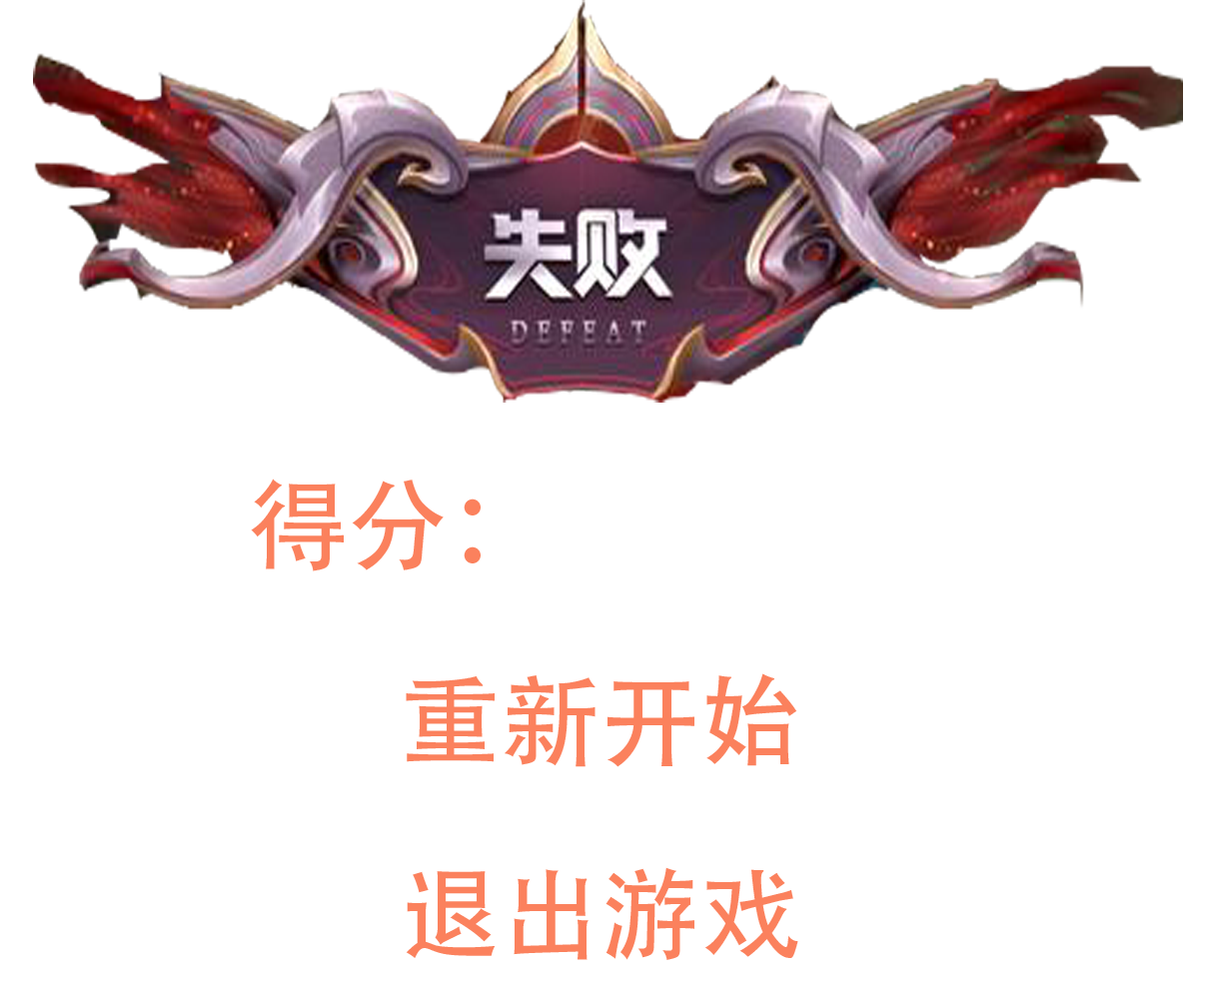
<style>
.page{position:relative;width:1205px;height:990px;background:#ffffff}
.page>*{position:absolute;margin:0}
.t1{font:99.9px "AdobeHeitiStd-Regular";color:#fb815d}
</style>
<div class="page">
<p class="t1" style="left:251px;top:478px;width:229px;height:93px">得分：</p>
<p class="t1" style="left:406px;top:673px;width:391px;height:94px">重新开始</p>
<p class="t1" style="left:406px;top:867px;width:392px;height:93px">退出游戏</p>
</div>
